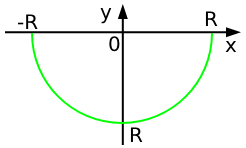
<style>
.page{position:relative;width:246px;height:148px;background:#ffffff}
.page>*{position:absolute;margin:0}
.t1{font:20px "DejaVuSans";color:#000000}
</style>
<div class="page">
<p class="t1" style="left:17px;top:14px;width:21px;height:15px">-R</p>
<p class="t1" style="left:100px;top:8px;width:12px;height:16px">y</p>
<p class="t1" style="left:205px;top:11px;width:13px;height:15px">R</p>
<p class="t1" style="left:109px;top:36px;width:11px;height:16px">0</p>
<p class="t1" style="left:225px;top:41px;width:12px;height:11px">x</p>
<p class="t1" style="left:130px;top:127px;width:13px;height:15px">R</p>
</div>
